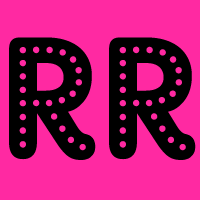
<style>
.page{position:relative;width:200px;height:200px;background:#ff29a2}
.page>*{position:absolute;margin:0}
.t1{font:175px "AdamGorry-Lights";color:#000000}
</style>
<div class="page">
<p class="t1" style="left:9px;top:37px;width:187px;height:123px">RR</p>
</div>
